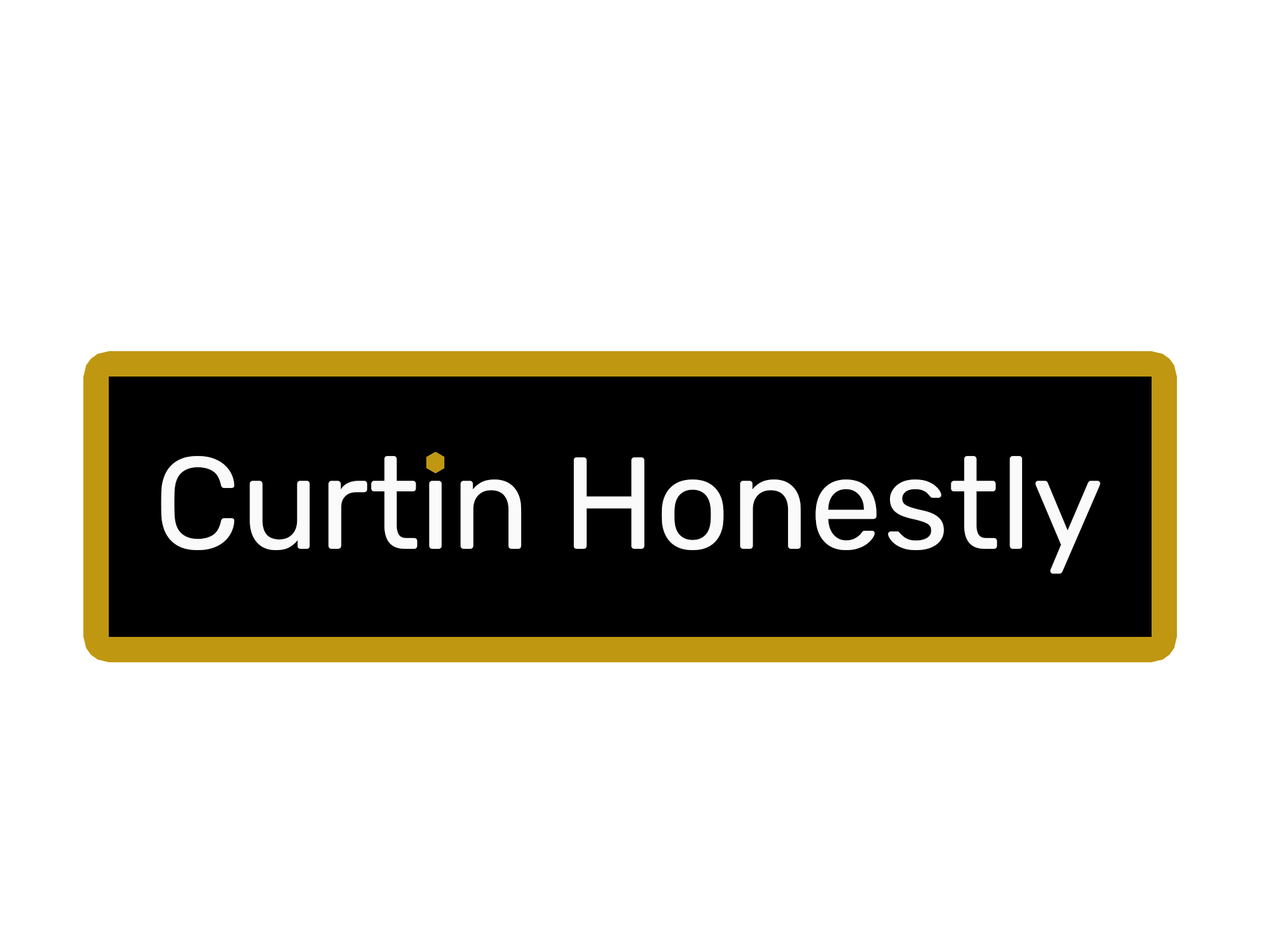
<style>
.page{position:relative;width:1261px;height:946px;background:#ffffff}
.page>*{position:absolute;margin:0}
.t1{font:130.5px "Rubik-Regular";color:#fafafa}
</style>
<div class="page">
<p class="t1" style="left:161px;top:454px;width:939px;height:120px">Curtin Honestly</p>
</div>
